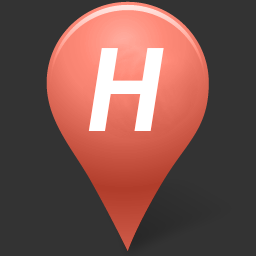
<style>
.page{position:relative;width:256px;height:256px;background:#333333}
.page>*{position:absolute;margin:0}
.t1{font:109.6px "FuturaLT-HeavyOblique";color:#ffffff;text-transform:uppercase}
</style>
<div class="page">
<p class="t1" style="left:88px;top:48px;width:76px;height:83px">H</p>
</div>
